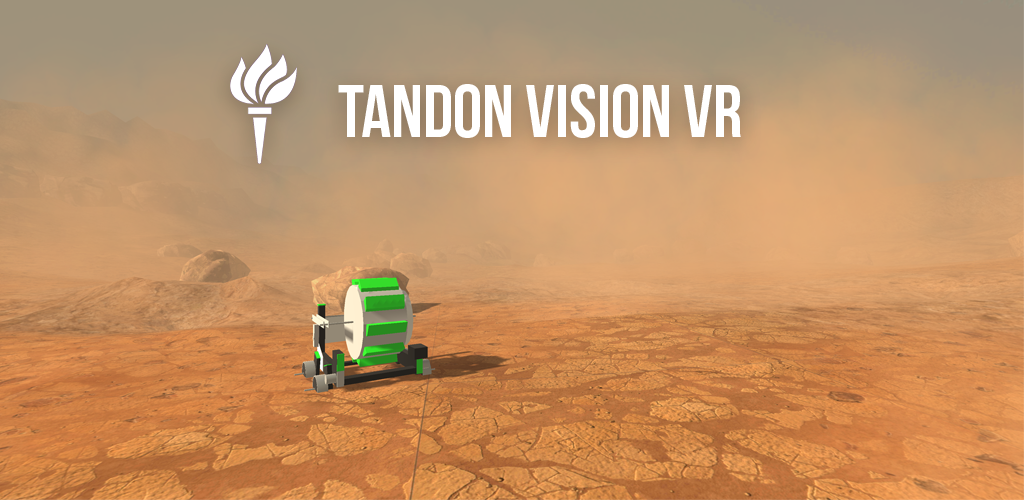
<style>
.page{position:relative;width:1024px;height:500px}
.page>*{position:absolute;margin:0}
.t1{font:73.8px "BebasNeueBold";color:#ffffff}
</style>
<div class="page">
<p class="t1" style="left:338px;top:84px;width:403px;height:54px">TANDON VISION VR</p>
</div>
